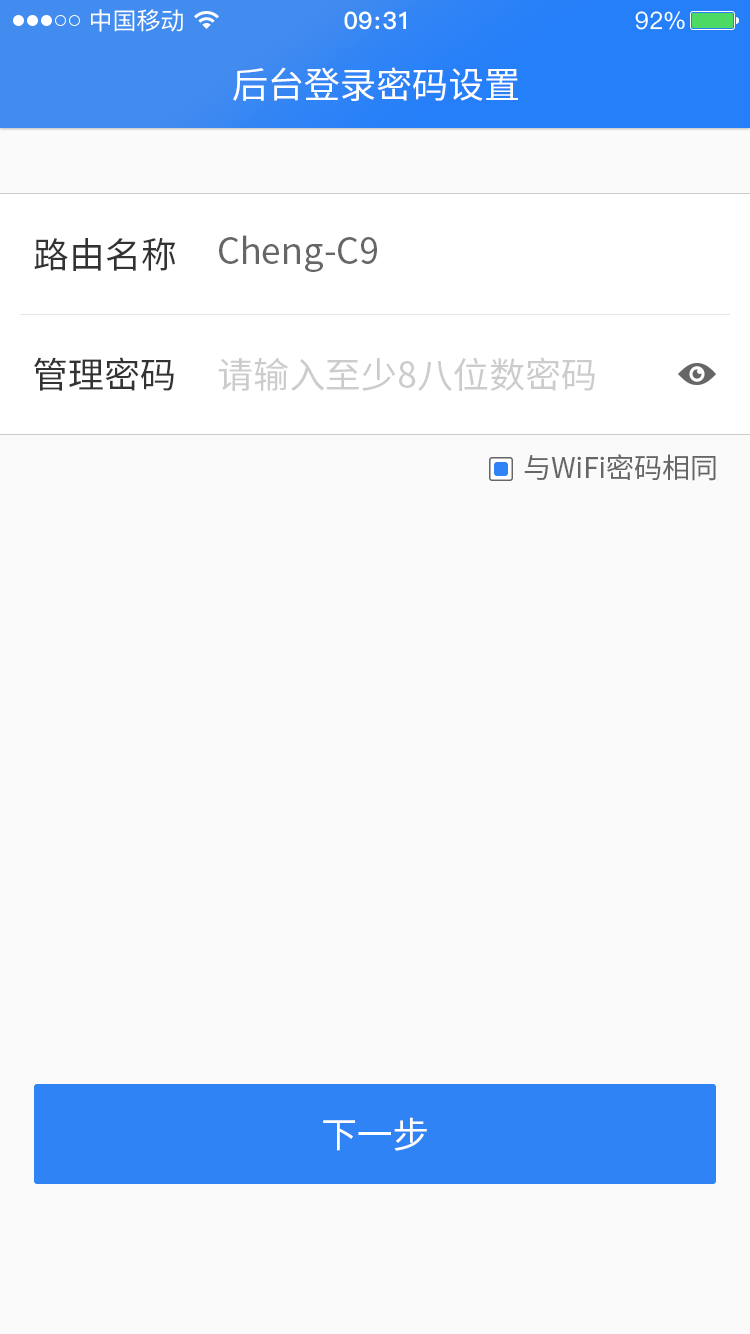
<style>
.page{position:relative;width:750px;height:1334px;background:#fafafa}
.page>*{position:absolute;margin:0}
.t1{font:36px "SourceHanSansCN-Regular";color:#ffffff}
.t2{font:36px "SourceHanSansCN-Regular";color:#333333}
.t3{font:36px "SourceHanSansCN-Regular";color:#666666}
.t4{font:36px "SourceHanSansCN-Regular";color:#cccccc}
.t5{font:28px "SourceHanSansCN-Regular";color:#666666}
</style>
<div class="page">
<p class="t1" style="left:233px;top:67px;width:285px;height:34px">后台登录密码设置</p>
<p class="t2" style="left:34px;top:237px;width:142px;height:34px">路由名称</p>
<p class="t3" style="left:219px;top:235px;width:158px;height:37px">Cheng-C9</p>
<p class="t2" style="left:34px;top:357px;width:140px;height:34px">管理密码</p>
<p class="t4" style="left:218px;top:357px;width:377px;height:34px">请输入至少8八位数密码</p>
<p class="t5" style="left:524px;top:454px;width:192px;height:27px">与WiFi密码相同</p>
<p class="t1" style="left:323px;top:1117px;width:104px;height:34px">下一步</p>
</div>
